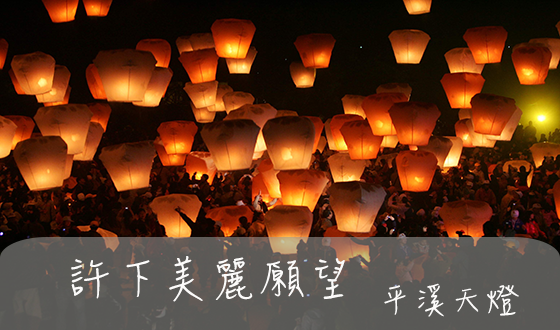
<style>
.page{position:relative;width:560px;height:330px}
.page>*{position:absolute;margin:0}
.t1{font:48px "DFHsiu-W3-WIN-BF";color:#fcfbfa}
.t2{font:36px "DFHsiu-W3-WIN-BF";color:#fcfbfa}
</style>
<div class="page">
<p class="t1" style="left:71px;top:256px;width:274px;height:46px">許下美麗願望</p>
<p class="t2" style="left:384px;top:283px;width:135px;height:34px">平溪天燈</p>
</div>
